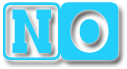
<style>
.page{position:relative;width:127px;height:69px;background:#23cffa}
.page>*{position:absolute;margin:0}
.t1{font:48px "babybloc";color:#23cffa}
</style>
<div class="page">
<p class="t1" style="left:3px;top:2px;width:116px;height:58px">No</p>
</div>
